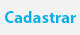
<style>
.page{position:relative;width:80px;height:35px;background:#f4f3f3}
.page>*{position:absolute;margin:0}
.t1{font:16.7px "MyriadPro-Bold";color:#00b2e8}
</style>
<div class="page">
<p class="t1" style="left:5px;top:11px;width:71px;height:12px">Cadastrar</p>
</div>
